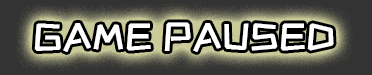
<style>
.page{position:relative;width:372px;height:75px;background:#333333}
.page>*{position:absolute;margin:0}
.t1{font:37px "ZCOOLKuaiLe-Regular";color:#ffffff;font-weight:bold}
</style>
<div class="page">
<p class="t1" style="left:34px;top:22px;width:300px;height:30px">GAME PAUSED</p>
</div>
